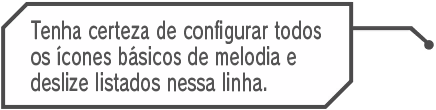
<style>
.page{position:relative;width:436px;height:110px;background:#fffeff}
.page>*{position:absolute;margin:0}
.t1{font:23.9px "RodinPro-DB";letter-spacing:0.018em;color:#555455;scale:0.69 1}
</style>
<div class="page">
<p class="t1" style="left:31px;top:20px;width:290px;height:24px">Tenha certeza de configurar todos</p>
<p class="t1" style="left:31px;top:45px;width:265px;height:21px">os ícones básicos de melodia e</p>
<p class="t1" style="left:31px;top:72px;width:236px;height:20px">deslize listados nessa linha.</p>
</div>
